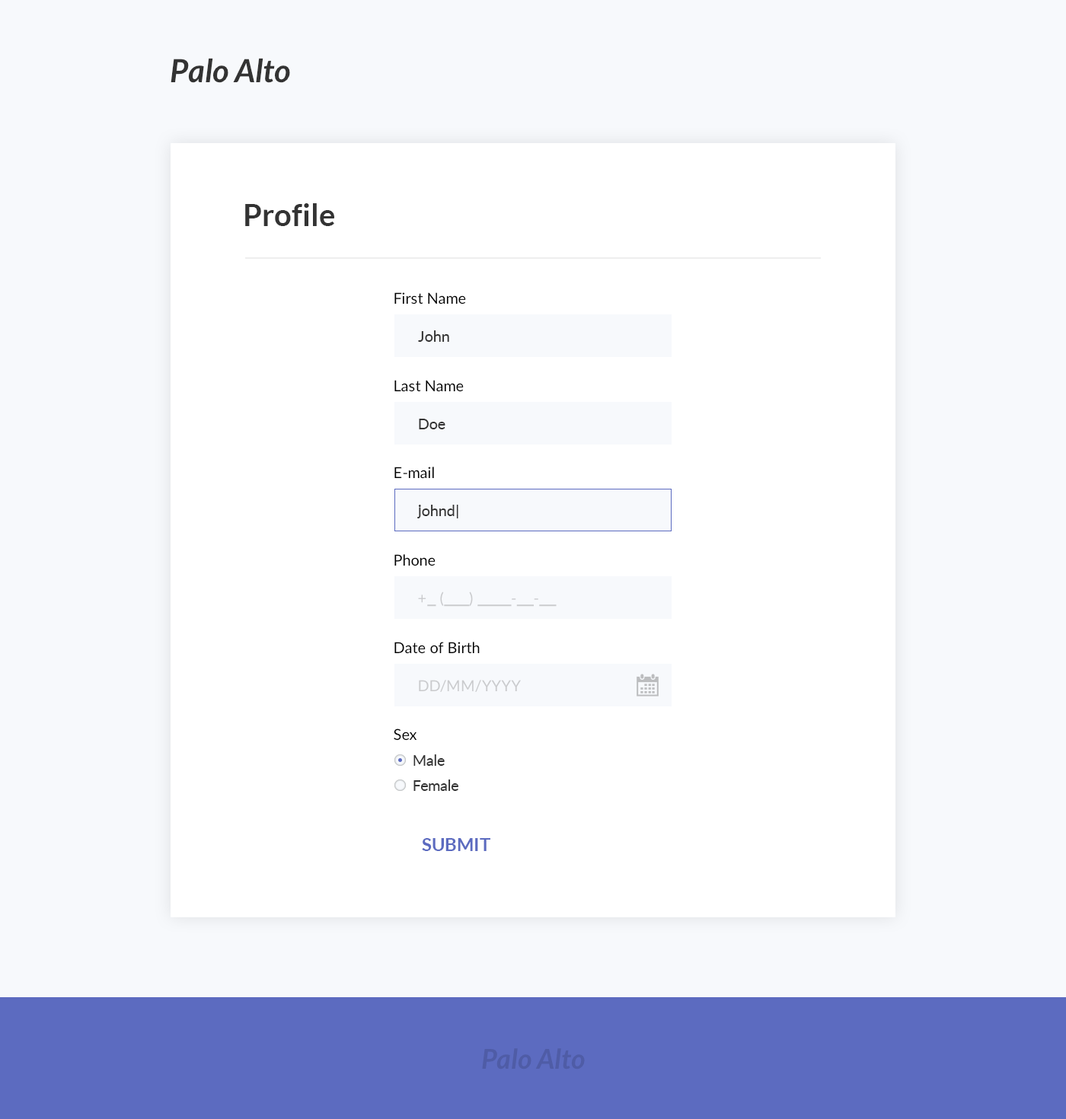
<style>
.page{position:relative;width:1066px;height:1119px;background:#ffffff}
.page>*{position:absolute;margin:0}
.t1{font:32px "Lato-BoldItalic";color:#333333}
.t2{font:30.4px "Lato-Bold";color:#333333}
.t3{font:15.2px "Lato-Regular";color:#000000}
.t4{font:15.2px "Lato-Regular";color:#333333}
.t5{font:15.2px "Lato-Regular";letter-spacing:0.025em;color:#cacbcd}
.t6{font:15.2px "Lato-Regular";color:#cacbcd}
.t7{font:18.3px "Lato-Bold";color:#5c6bc0;text-transform:uppercase}
.t8{font:27.4px "Lato-BoldItalic";color:#4f5ca6}
</style>
<div class="page">
<p class="t1" style="left:171px;top:58px;width:119px;height:25px">Palo Alto</p>
<p class="t2" style="left:245px;top:203px;width:89px;height:23px">Profile</p>
<p class="t3" style="left:394px;top:292px;width:72px;height:12px">First Name</p>
<p class="t4" style="left:418px;top:330px;width:31px;height:12px">John</p>
<p class="t3" style="left:394px;top:380px;width:70px;height:12px">Last Name</p>
<p class="t4" style="left:419px;top:419px;width:26px;height:10px">Doe</p>
<p class="t3" style="left:394px;top:467px;width:40px;height:12px">E-mail</p>
<p class="t4" style="left:417px;top:505px;width:41px;height:13px">johnd|</p>
<p class="t3" style="left:394px;top:554px;width:41px;height:12px">Phone</p>
<p class="t5" style="left:418px;top:591px;width:138px;height:16px">+   (      )         -    -</p>
<p class="t3" style="left:394px;top:642px;width:86px;height:12px">Date of Birth</p>
<p class="t6" style="left:419px;top:680px;width:102px;height:12px">DD/MM/YYYY</p>
<p class="t3" style="left:394px;top:728px;width:23px;height:13px">Sex</p>
<p class="t4" style="left:413px;top:754px;width:32px;height:12px">Male</p>
<p class="t4" style="left:413px;top:779px;width:45px;height:12px">Female</p>
<p class="t7" style="left:422px;top:838px;width:68px;height:13px">SUBMIT</p>
<p class="t8" style="left:482px;top:1048px;width:103px;height:21px">Palo Alto</p>
</div>
